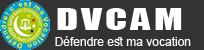
<style>
.page{position:relative;width:204px;height:50px;background:#333333}
.page>*{position:absolute;margin:0}
.t1{font:28px "Impact";letter-spacing:0.08em;color:#ffffff;scale:1.43 1}
.t2{font:12px "ArialMT";color:#ffffff}
</style>
<div class="page">
<p class="t1" style="left:57px;top:8px;width:125px;height:22px">DVCAM</p>
<p class="t2" style="left:55px;top:36px;width:136px;height:10px">Défendre est ma vocation</p>
</div>
